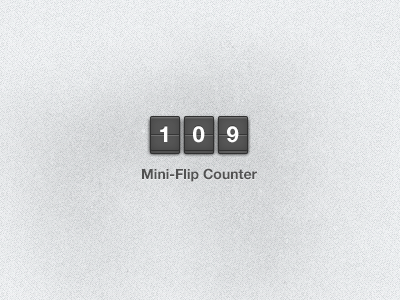
<style>
.page{position:relative;width:400px;height:300px}
.page>*{position:absolute;margin:0}
.t1{font:22px "HelveticaNeue-Bold";color:#fefefe}
.t2{font:14px "HelveticaNeue-Bold";color:#565656}
</style>
<div class="page">
<p class="t1" style="left:160px;top:126px;width:8px;height:16px">1</p>
<p class="t1" style="left:193px;top:126px;width:12px;height:17px">0</p>
<p class="t1" style="left:227px;top:126px;width:12px;height:17px">9</p>
<p class="t2" style="left:142px;top:168px;width:115px;height:14px">Mini-Flip Counter</p>
</div>
